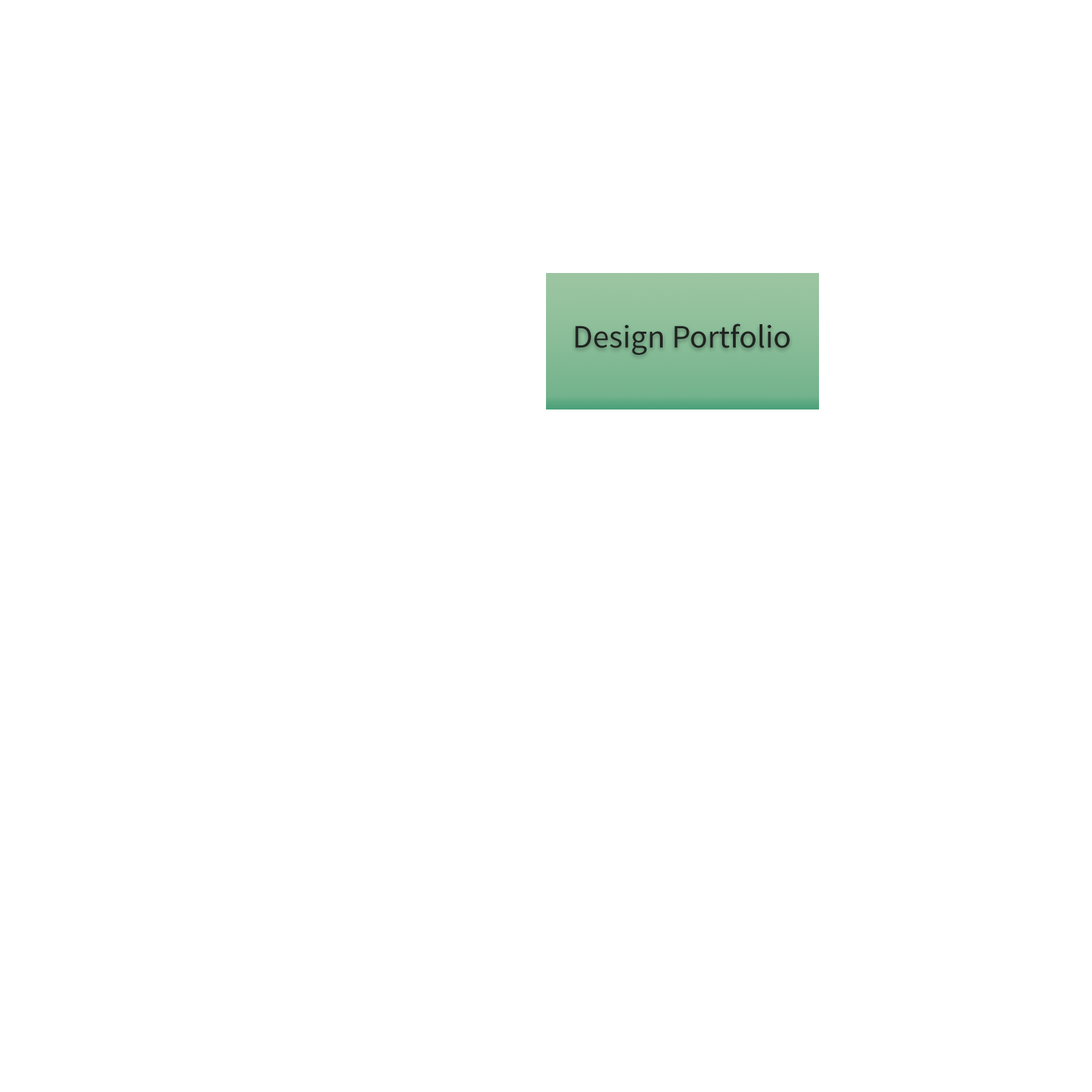
<style>
.page{position:relative;width:1092px;height:1092px;background:#ffffff}
.page>*{position:absolute;margin:0}
.t1{font:32.8px "SourceSansPro-Regular";color:#1f2421}
</style>
<div class="page">
<p class="t1" style="left:575px;top:324px;width:215px;height:31px">Design Portfolio</p>
</div>
